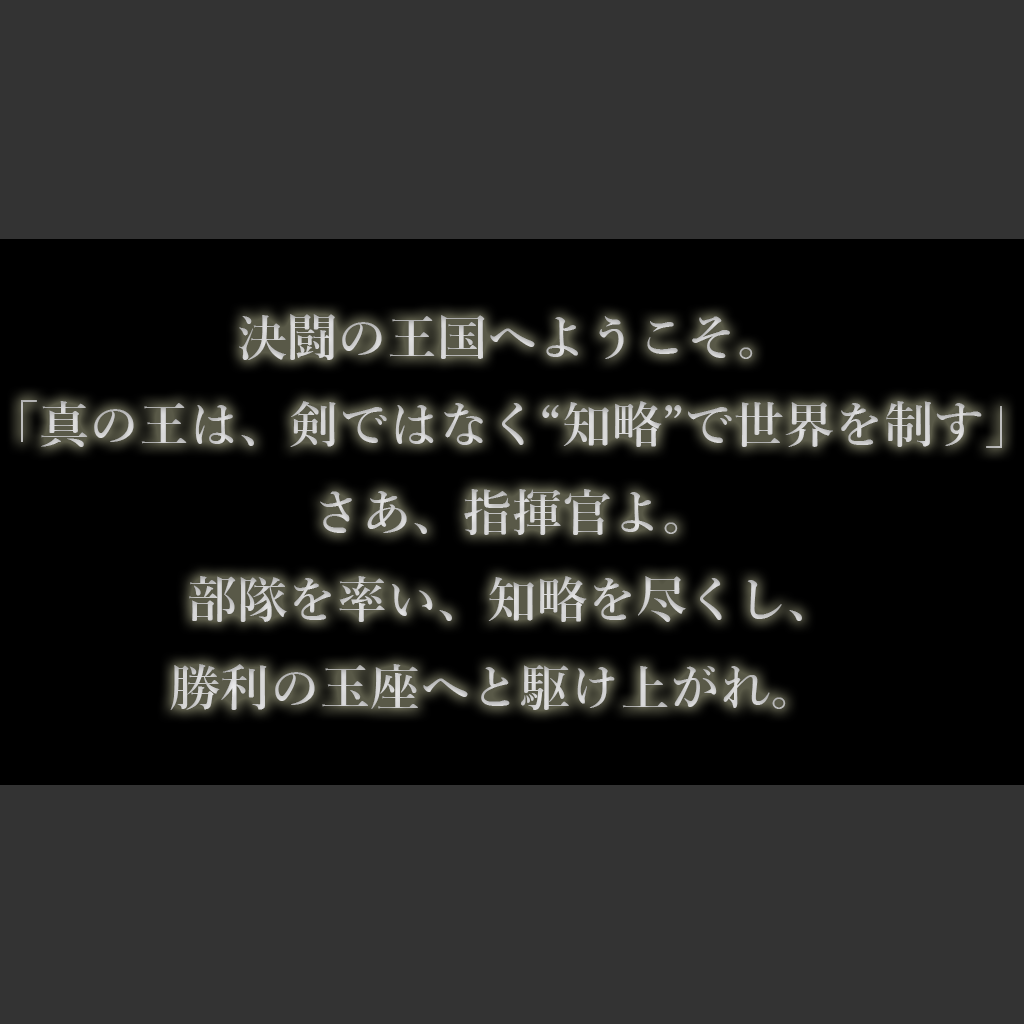
<style>
.page{position:relative;width:1024px;height:1024px;background:#333333}
.page>*{position:absolute;margin:0}
.t1{font:50px "YuMincho-Demibold";color:#cfcfcf}
</style>
<div class="page">
<p class="t1" style="left:21px;top:314px;width:981px;height:396px;text-align:center">決闘の王国へようこそ。<br>「真の王は、剣ではなく“知略”で世界を制す」<br>さあ、指揮官よ。<br>部隊を率い、知略を尽くし、<br>勝利の玉座へと駆け上がれ。</p>
</div>
